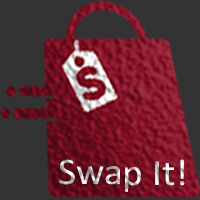
<style>
.page{position:relative;width:200px;height:200px;background:#333333}
.page>*{position:absolute;margin:0}
.t1{font:37.8px "Calibri";scale:1.04 1}
</style>
<div class="page">
<p class="t1" style="left:59px;top:159px;width:126px;height:33px">Swap It!</p>
</div>
